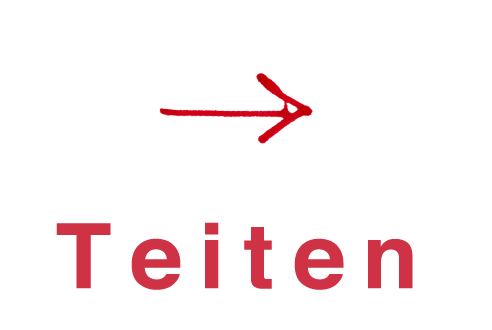
<style>
.page{position:relative;width:492px;height:330px;background:#ffffff}
.page>*{position:absolute;margin:0}
.t1{font:90px "Helvetica-Bold";letter-spacing:0.2em;color:#ce3244}
</style>
<div class="page">
<p class="t1" style="left:56px;top:222px;width:357px;height:68px">Teiten</p>
</div>
